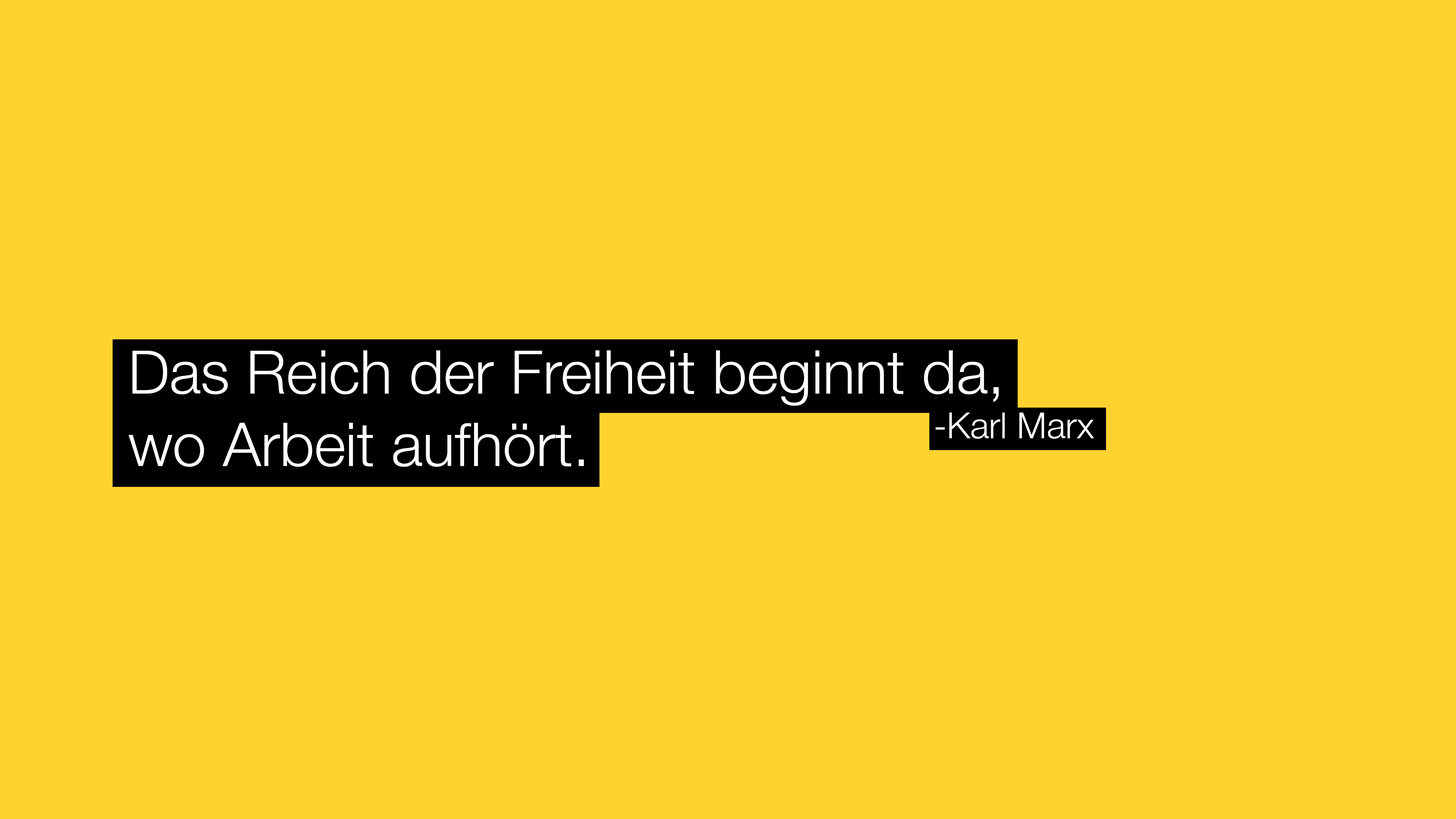
<style>
.page{position:relative;width:1456px;height:819px;background:#fed330}
.page>*{position:absolute;margin:0}
.t1{font:60.2px "HelveticaNeue-Light";color:#ffffff}
.t2{font:36.1px "HelveticaNeue-Light";color:#ffffff}
</style>
<div class="page">
<p class="t1" style="left:129px;top:350px;width:870px;height:117px">Das Reich der Freiheit beginnt da, <br>wo Arbeit aufhört.</p>
<p class="t2" style="left:935px;top:413px;width:159px;height:26px">-Karl Marx</p>
</div>
